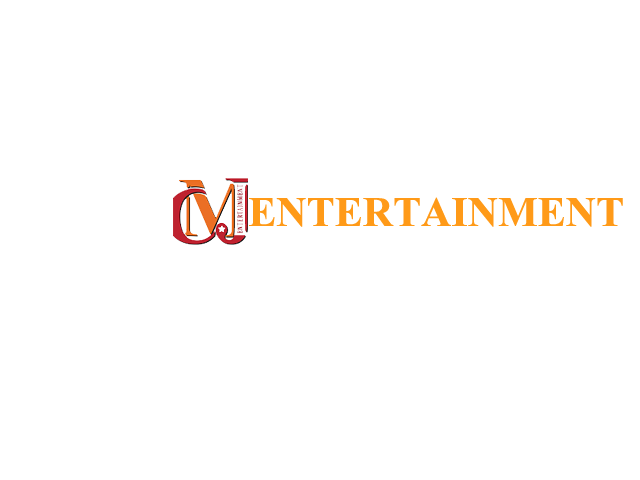
<style>
.page{position:relative;width:640px;height:480px;background:#ffffff}
.page>*{position:absolute;margin:0}
.t1{font:42px "TimesNewRomanPS-BoldMT";color:#ff9a18}
</style>
<div class="page">
<p class="t1" style="left:249px;top:197px;width:374px;height:30px">ENTERTAINMENT</p>
</div>
